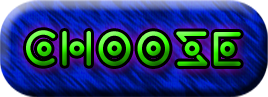
<style>
.page{position:relative;width:268px;height:97px}
.page>*{position:absolute;margin:0}
.t1{font:50px "wearealien!!"}
</style>
<div class="page">
<p class="t1" style="left:26px;top:30px;width:215px;height:36px">Choose</p>
</div>
